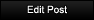
<style>
.page{position:relative;width:94px;height:20px}
.page>*{position:absolute;margin:0}
.t1{font:10px "ArialMT";color:#ffffff}
</style>
<div class="page">
<p class="t1" style="left:27px;top:5px;width:40px;height:9px">Edit Post</p>
</div>
